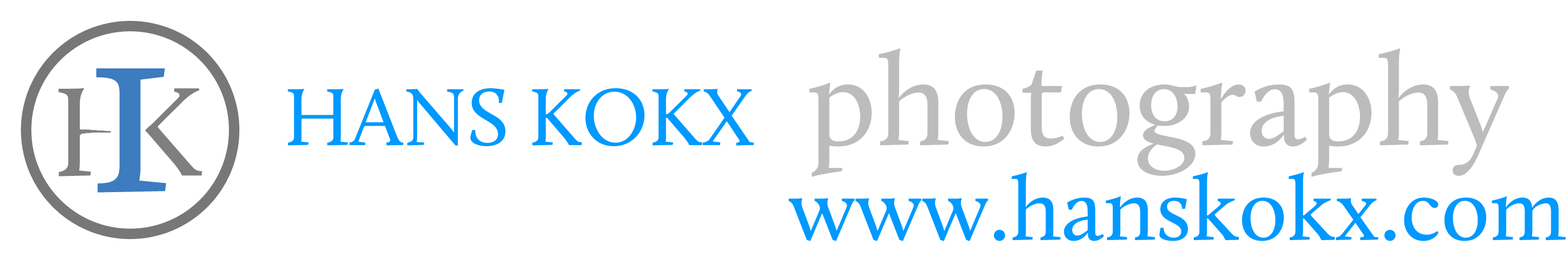
<style>
.page{position:relative;width:1568px;height:261px;background:#ffffff}
.page>*{position:absolute;margin:0}
.t1{font:130.7px "Calluna-Regular";color:#bcbcbc}
.t2{font:261.3px "Calluna-Regular";color:#3c7cbf}
.t3{font:83.6px "Calluna-Regular";color:#0099ff}
.t4{font:91.5px "Calluna-Regular";color:#0099ff}
</style>
<div class="page">
<p class="t1" style="left:809px;top:48px;width:700px;height:129px">photography</p>
<p class="t2" style="left:96px;top:68px;width:70px;height:125px">1</p>
<p class="t3" style="left:287px;top:88px;width:467px;height:58px">HANS KOKX</p>
<p class="t4" style="left:789px;top:172px;width:777px;height:69px">www.hanskokx.com</p>
</div>
